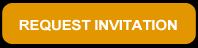
<style>
.page{position:relative;width:198px;height:48px;background:#e29700}
.page>*{position:absolute;margin:0}
.t1{font:14px "Arial-BoldMT";letter-spacing:-0.025em;color:#ffffff;text-transform:uppercase;scale:1.1 1}
</style>
<div class="page">
<p class="t1" style="left:19px;top:19px;width:158px;height:12px">Request Invitation</p>
</div>
